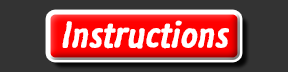
<style>
.page{position:relative;width:288px;height:72px;background:#333333}
.page>*{position:absolute;margin:0}
.t1{font:36.8px "SegoeMarker";color:#ffffff;font-weight:bold;font-style:italic}
</style>
<div class="page">
<p class="t1" style="left:62px;top:20px;width:167px;height:29px">Instructions</p>
</div>
